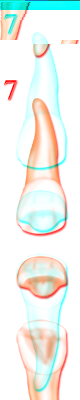
<style>
.page{position:relative;width:80px;height:400px;background:#ffffff}
.page>*{position:absolute;margin:0}
.t1{font:28.4px "TimesNewRomanPSMT";letter-spacing:0.005em}
</style>
<div class="page">
<p class="t1" style="left:4px;top:4px;width:13px;height:20px">7</p>
</div>
